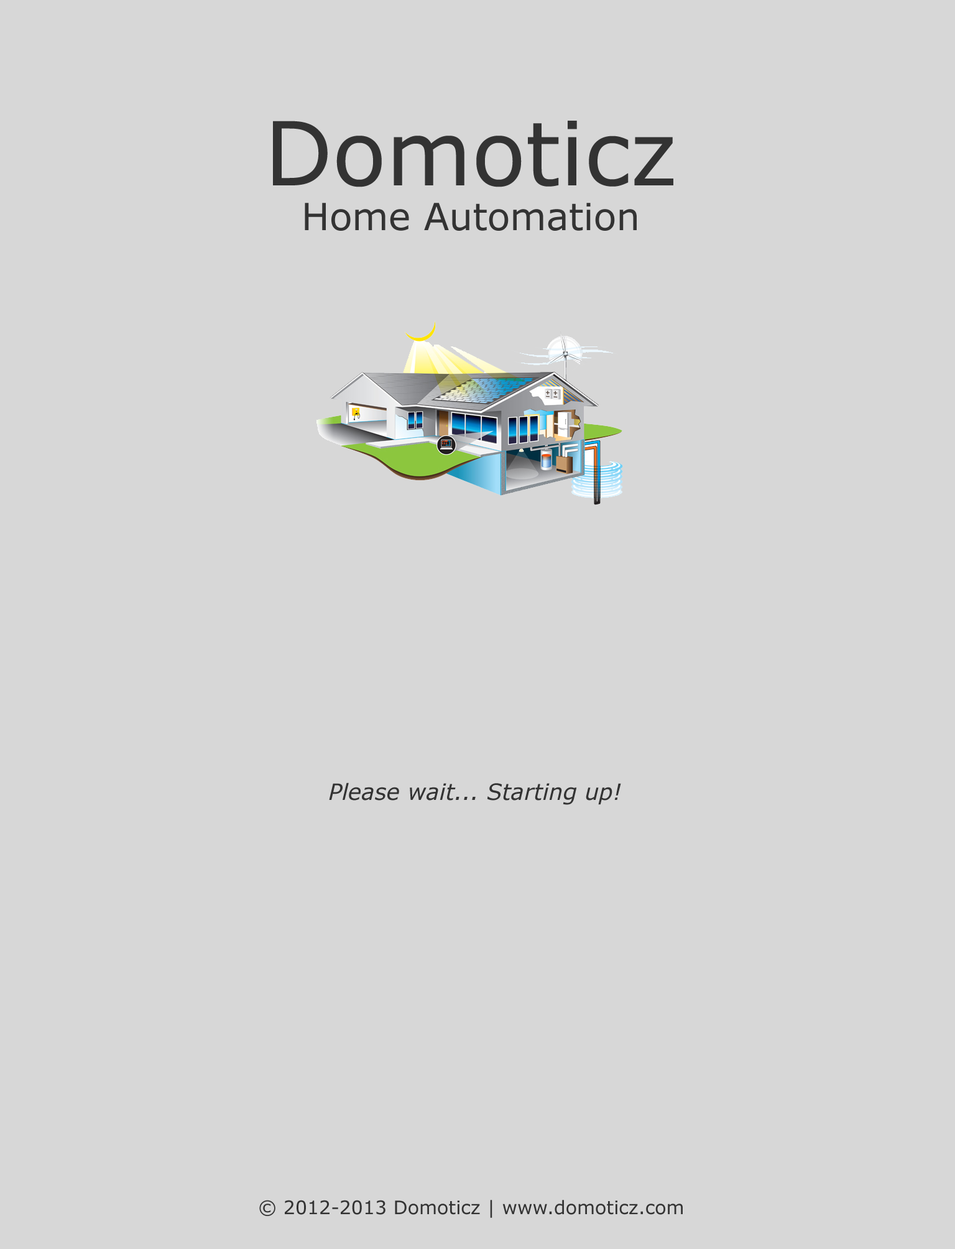
<style>
.page{position:relative;width:955px;height:1249px;background:#d7d7d7}
.page>*{position:absolute;margin:0}
.t1{font:37.3px "Verdana";color:#333333}
.t2{font:88.3px "Verdana";color:#333333}
.t3{font:22.4px "Verdana-Italic";color:#333333}
.t4{font:18.7px "Verdana";color:#333333}
</style>
<div class="page">
<p class="t1" style="left:273px;top:121px;width:400px;height:110px;text-align:center"><span class="t2">Domoticz<br></span>Home Automation</p>
<p class="t3" style="left:329px;top:782px;width:292px;height:23px">Please wait... Starting up!</p>
<p class="t4" style="left:259px;top:1199px;width:424px;height:18px">© 2012-2013 Domoticz | www.domoticz.com</p>
</div>
